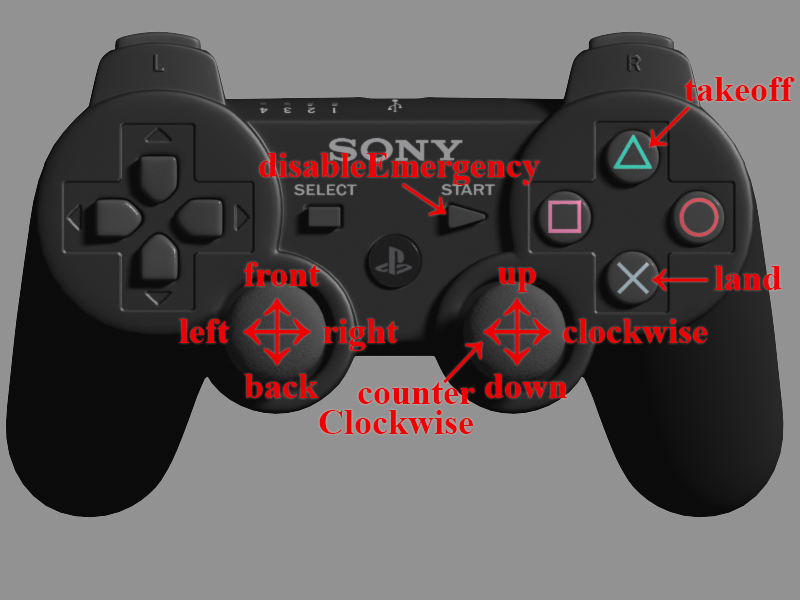
<style>
.page{position:relative;width:800px;height:600px;background:#929292}
.page>*{position:absolute;margin:0}
.t1{font:36px "TimesNewRomanPS-BoldMT";color:#ef0000}
.t2{font:60px "TimesNewRomanPS-BoldMT";color:#ef0000}
.t3{font:36px/30px "TimesNewRomanPS-BoldMT";color:#ef0000}
</style>
<div class="page">
<p class="t1" style="left:684px;top:77px;width:111px;height:24px">takeoff</p>
<p class="t2" style="left:649px;top:106px;width:41px;height:41px;rotate:-45deg">←</p>
<p class="t1" style="left:259px;top:153px;width:281px;height:32px">disableEmergency</p>
<p class="t2" style="left:402px;top:183px;width:45px;height:33px;rotate:-56deg">↓</p>
<p class="t1" style="left:244px;top:262px;width:76px;height:24px">front</p>
<p class="t1" style="left:498px;top:268px;width:38px;height:24px">up</p>
<p class="t2" style="left:652px;top:269px;width:56px;height:22px">←</p>
<p class="t1" style="left:714px;top:266px;width:68px;height:24px">land</p>
<p class="t1" style="left:179px;top:319px;width:50px;height:24px">left</p>
<p class="t1" style="left:323px;top:319px;width:75px;height:32px">right</p>
<p class="t1" style="left:563px;top:319px;width:145px;height:24px">clockwise</p>
<p class="t2" style="left:443px;top:341px;width:40px;height:43px;rotate:133deg">←</p>
<p class="t1" style="left:244px;top:374px;width:75px;height:24px">back</p>
<p class="t1" style="left:485px;top:374px;width:82px;height:24px">down</p>
<p class="t3" style="left:319px;top:382px;width:156px;height:52px;text-align:right">counter<br>Clockwise</p>
</div>
